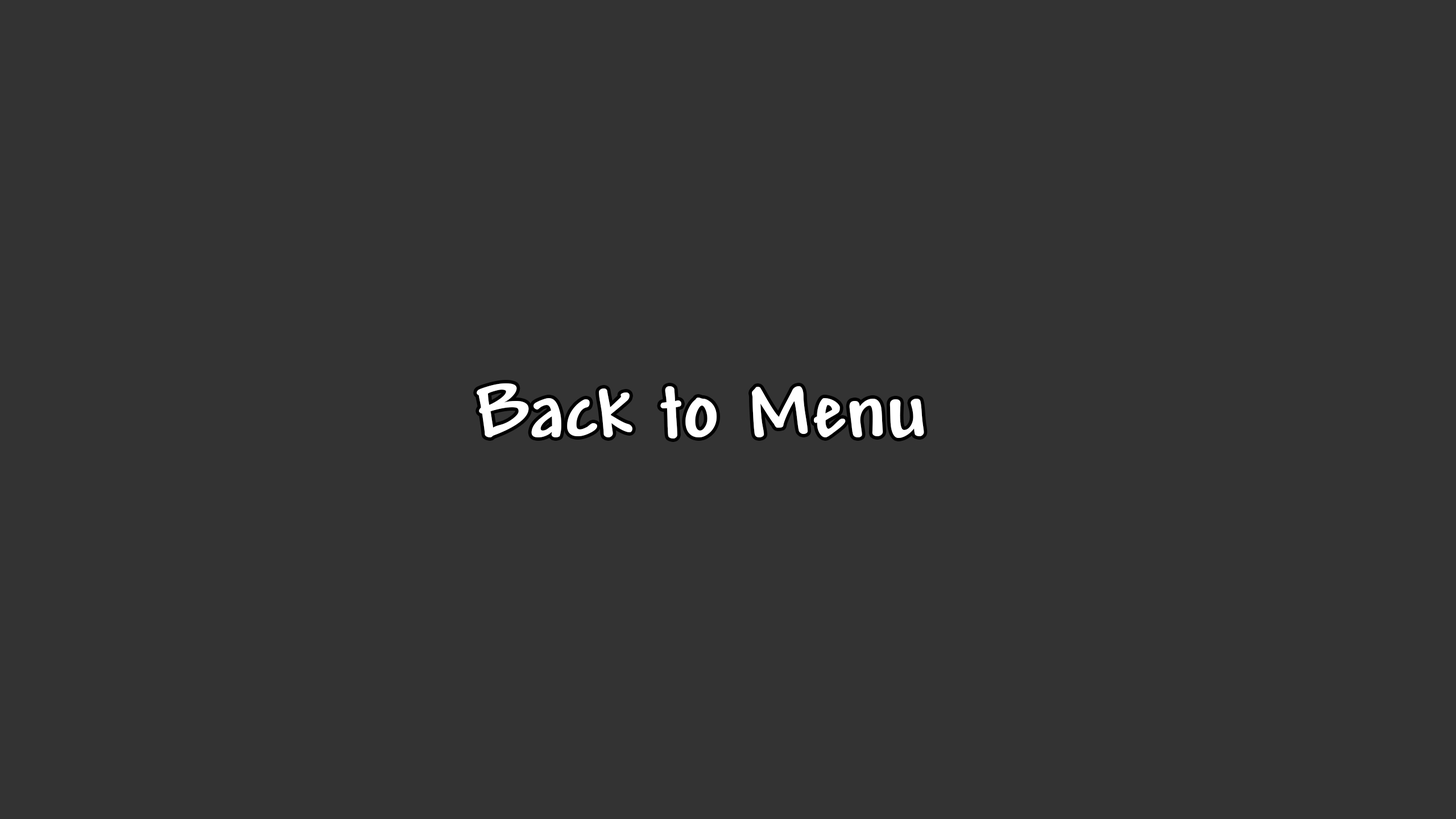
<style>
.page{position:relative;width:1456px;height:819px;background:#333333}
.page>*{position:absolute;margin:0}
.t1{font:85.3px "Andy-Bold";color:#ffffff}
</style>
<div class="page">
<p class="t1" style="left:477px;top:383px;width:447px;height:56px">Back to Menu</p>
</div>
